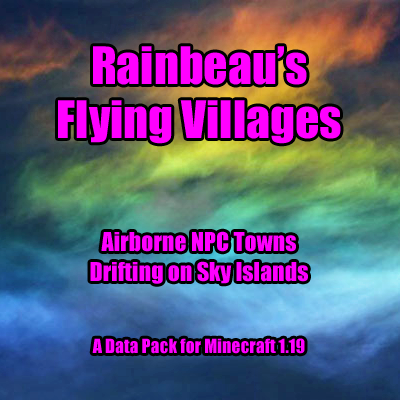
<style>
.page{position:relative;width:400px;height:400px}
.page>*{position:absolute;margin:0}
.t1{font:23.9px/29.9px "Impact";color:#ff00ff}
.t2{font:47.8px/53.8px "Impact";color:#ff00ff}
.t3{font:17.9px/23.9px "Impact";color:#ff00ff}
</style>
<div class="page">
<p class="t1" style="left:58px;top:46px;width:283px;height:308px;text-align:center"><span class="t2">Rainbeau’s<br>Flying Villages<br><br></span><br>Airborne NPC Towns<br>Drifting on Sky Islands<span class="t3"><br><br><br>A Data Pack for Minecraft 1.19</span></p>
</div>
